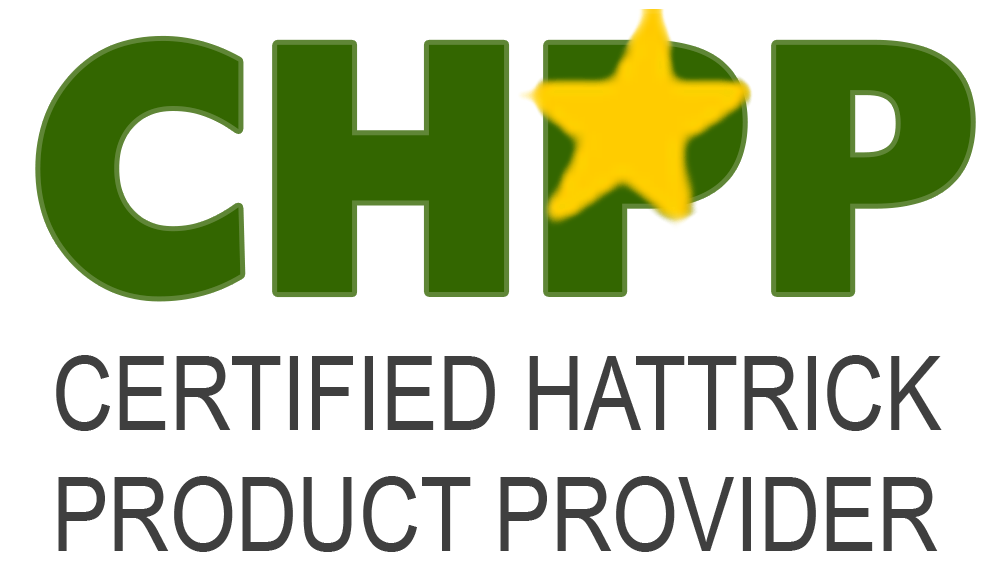
<style>
.page{position:relative;width:1000px;height:579px;background:#ffffff}
.page>*{position:absolute;margin:0}
.t1{font:361.8px "Humanist521BT-ExtraBold";letter-spacing:0.02em;color:#336600;scale:0.87 1}
.t2{font:102.9px/121px "ArialMT";color:#3f3f3f;scale:0.83 1}
</style>
<div class="page">
<p class="t1" style="left:40px;top:40px;width:931px;height:257px">CHPP</p>
<p class="t2" style="left:56px;top:355px;width:886px;height:197px">CERTIFIED HATTRICK <br>PRODUCT PROVIDER</p>
</div>
